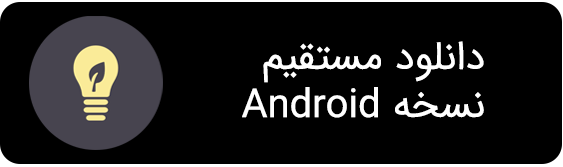
<style>
.page{position:relative;width:563px;height:167px;background:#000000}
.page>*{position:absolute;margin:0}
.t1{font:40px "IRANSansWebFaNum";color:#ffffff}
</style>
<div class="page">
<p class="t1" style="left:242px;top:41px;width:242px;height:77px">دانلود مستقیم <br>نسخه Android</p>
</div>
